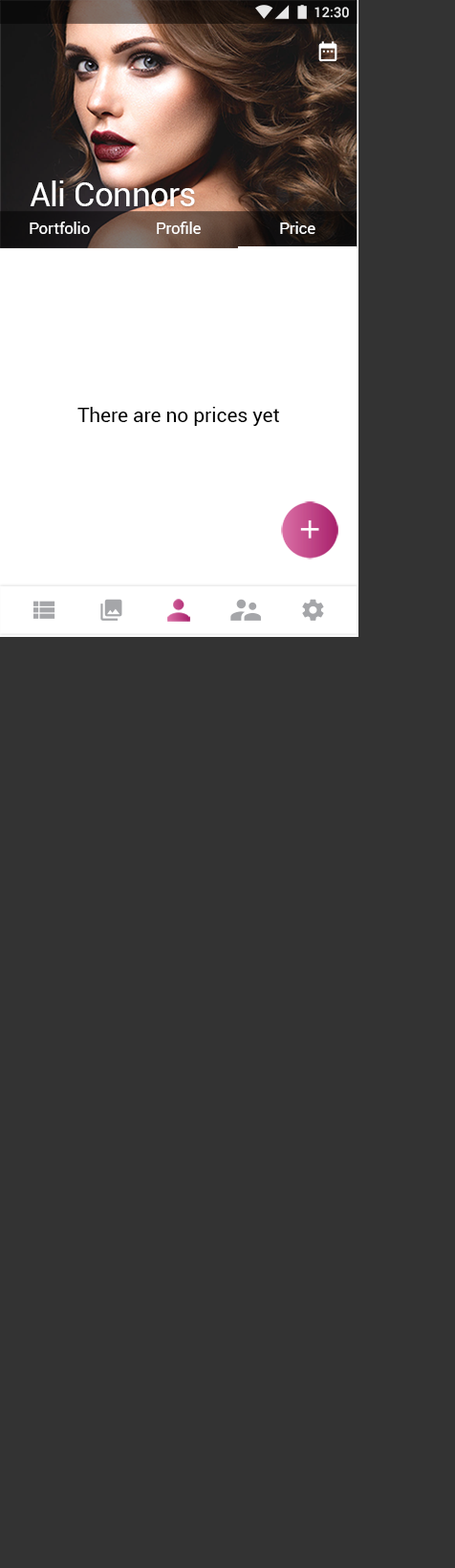
<style>
.page{position:relative;width:455px;height:1568px;background:#333333}
.page>*{position:absolute;margin:0}
.t1{font:13.9px "Roboto-Medium";color:#ffffff}
.t2{font:33.7px "Roboto-Regular";letter-spacing:-0.005em;color:#ffffff}
.t3{font:15.8px "Roboto-Regular";letter-spacing:0.01em;color:#ffffff}
.t4{font:19.8px "Roboto-Regular";color:#000000}
</style>
<div class="page">
<p class="t1" style="left:314px;top:7px;width:35px;height:11px">12:30</p>
<p class="t2" style="left:30px;top:180px;width:165px;height:26px">Ali Connors</p>
<p class="t3" style="left:30px;top:222px;width:60px;height:12px">Portfolio</p>
<p class="t3" style="left:157px;top:222px;width:44px;height:12px">Profile</p>
<p class="t3" style="left:280px;top:222px;width:35px;height:12px">Price</p>
<p class="t4" style="left:77px;top:407px;width:202px;height:19px">There are no prices yet</p>
</div>
